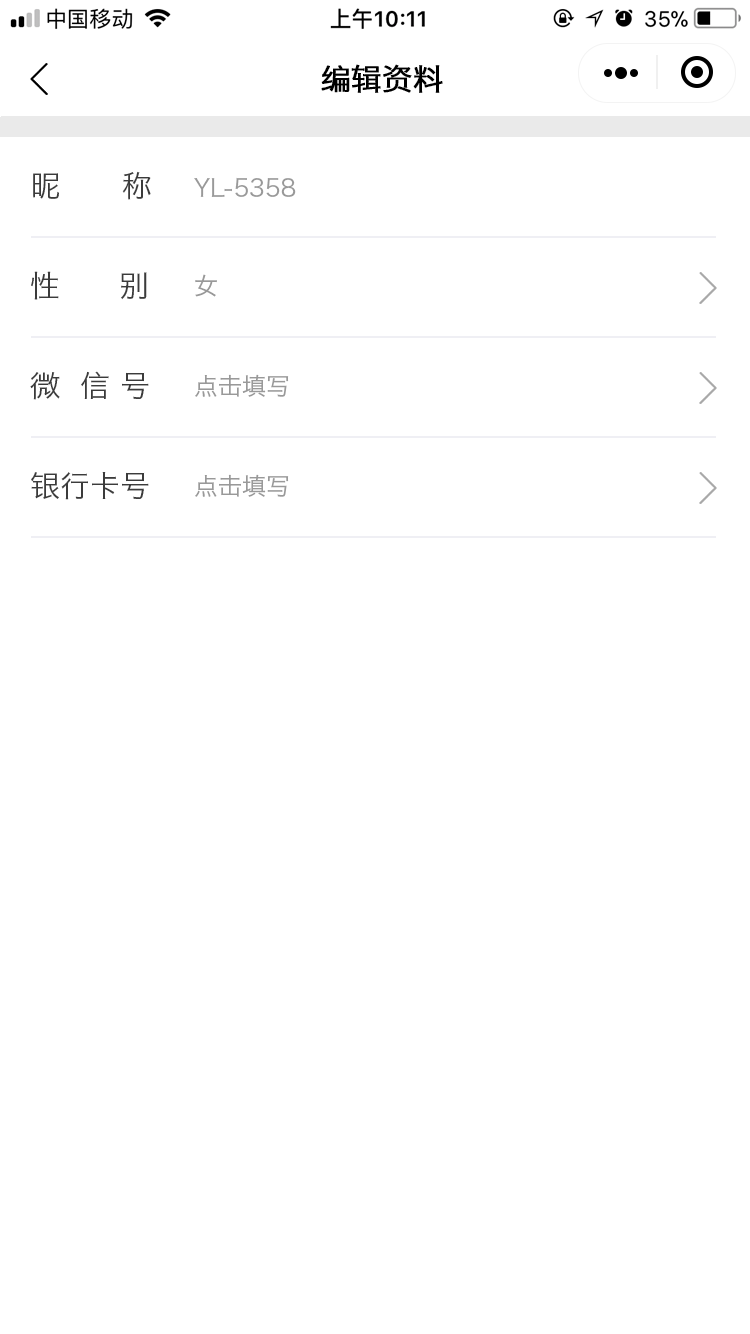
<style>
.page{position:relative;width:750px;height:1334px;background:#ffffff}
.page>*{position:absolute;margin:0}
.t1{font:30px "HiraginoSansGB-W3";color:#000000;text-transform:uppercase;font-weight:bold}
.t2{font:30px "HiraginoSansGB-W3";letter-spacing:-0.07em;color:#3b3b3b;text-transform:uppercase}
.t3{font:24px "HiraginoSansGB-W3";color:#999999;text-transform:uppercase}
.t4{font:30px "HiraginoSansGB-W3";color:#3b3b3b;text-transform:uppercase}
</style>
<div class="page">
<p class="t1" style="left:321px;top:64px;width:122px;height:29px">编辑资料</p>
<p class="t2" style="left:33px;top:171px;width:118px;height:29px">昵        称</p>
<p class="t3" style="left:194px;top:177px;width:102px;height:20px">YL-5358</p>
<p class="t4" style="left:31px;top:271px;width:116px;height:29px">性      别</p>
<p class="t3" style="left:195px;top:274px;width:22px;height:23px">女</p>
<p class="t4" style="left:30px;top:371px;width:119px;height:29px">微  信 号</p>
<p class="t3" style="left:195px;top:374px;width:94px;height:23px">点击填写</p>
<p class="t4" style="left:31px;top:472px;width:118px;height:28px">银行卡号</p>
<p class="t3" style="left:195px;top:474px;width:94px;height:23px">点击填写</p>
</div>
